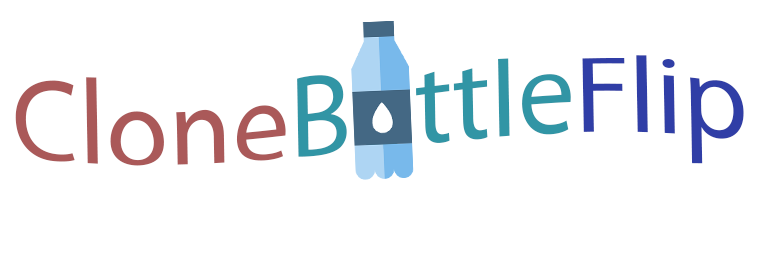
<style>
.page{position:relative;width:760px;height:253px;background:#ffffff}
.page>*{position:absolute;margin:0}
.t1{font:114.6px "MyriadPro-Regular";color:#3195a5}
.t2{font:114.6px "MyriadPro-Regular";color:#aa5959}
.t3{font:114.6px "MyriadPro-Regular";color:#303ea6}
</style>
<div class="page">
<p class="t1" style="left:15px;top:55px;width:729px;height:111px;rotate:-1deg"><span class="t2">Clone</span>Bottle<span class="t3">Flip</span></p>
</div>
